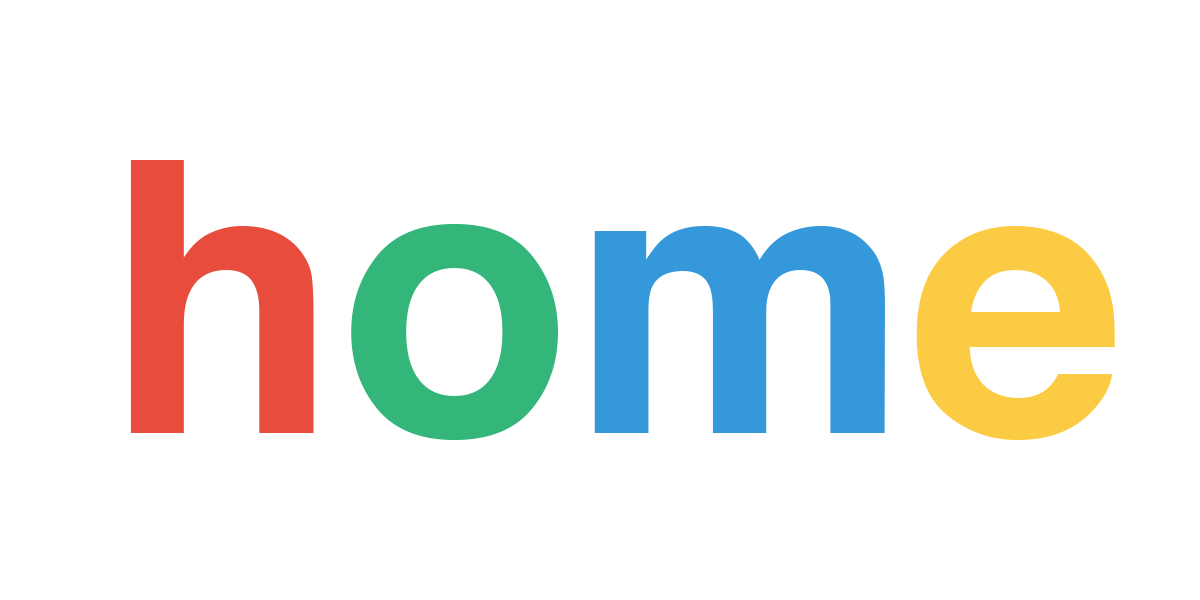
<style>
.page{position:relative;width:1200px;height:600px;background:#ffffff}
.page>*{position:absolute;margin:0}
.t1{font:380px "Helvetica-Bold";color:#e74c3c}
.t2{font:380px "Helvetica-Bold";color:#34b67a}
.t3{font:380px "Helvetica-Bold";color:#3498db}
.t4{font:380px "Helvetica-Bold";color:#fbcb43}
</style>
<div class="page">
<p class="t1" style="left:130px;top:160px;width:985px;height:280px">h<span class="t2">o</span><span class="t3">m</span><span class="t4">e</span></p>
</div>
